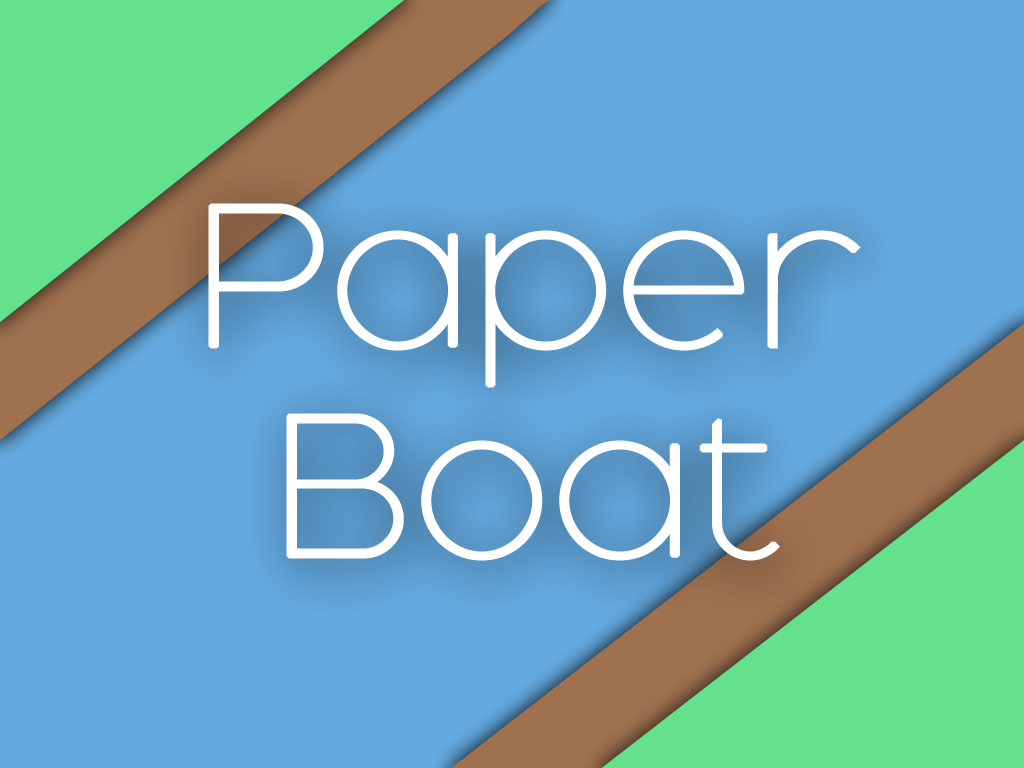
<style>
.page{position:relative;width:1024px;height:768px;background:#64aae1}
.page>*{position:absolute;margin:0}
.t1{font:175px "Adequate-ExtraLight";color:#ffffff;font-weight:bold}
</style>
<div class="page">
<p class="t1" style="left:208px;top:203px;width:653px;height:358px;text-align:center">Paper<br>Boat</p>
</div>
